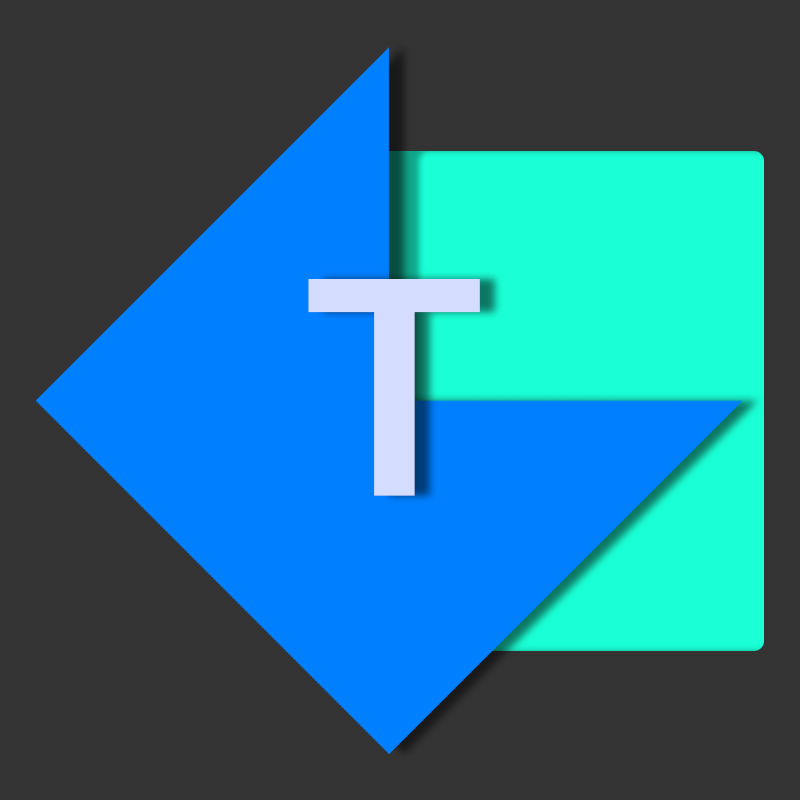
<style>
.page{position:relative;width:800px;height:800px;background:#333333}
.page>*{position:absolute;margin:0}
.t1{font:300px "Lato-Bold";color:#d4dcff}
</style>
<div class="page">
<p class="t1" style="left:308px;top:279px;width:172px;height:217px">T</p>
</div>
